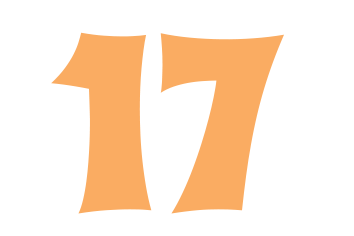
<style>
.page{position:relative;width:354px;height:236px;background:#ffffff}
.page>*{position:absolute;margin:0}
.t1{font:250px "SpicyRice-Regular";color:#faac62}
</style>
<div class="page">
<p class="t1" style="left:51px;top:32px;width:233px;height:182px">17</p>
</div>
